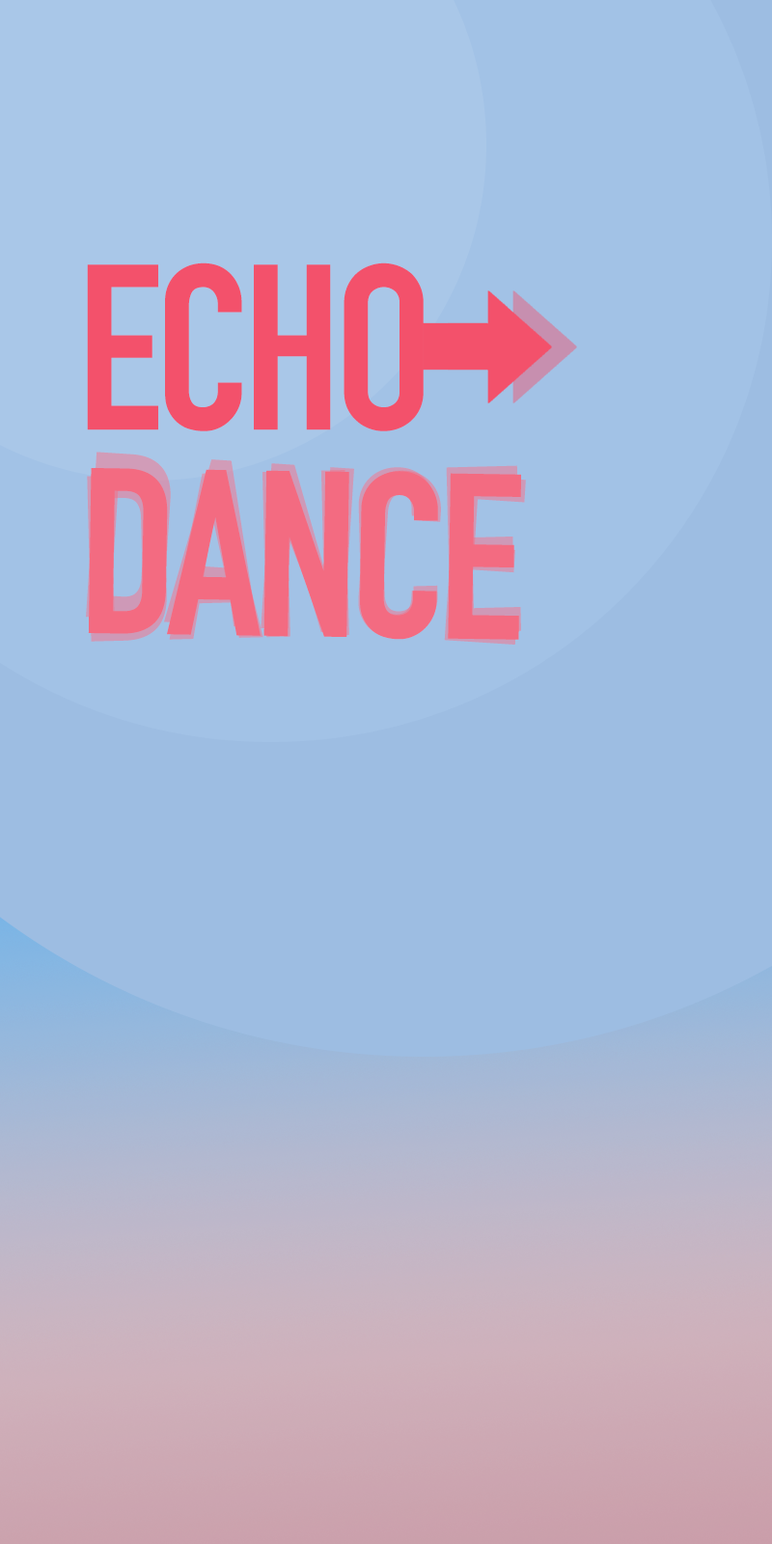
<style>
.page{position:relative;width:772px;height:1544px;background:#9dbde2}
.page>*{position:absolute;margin:0}
.t1{font:231.6px "DINCondensed-Bold";letter-spacing:-0.03em;color:#f3516b}
.t2{font:231.6px "DINCondensed-Bold";letter-spacing:-0.03em;color:#f36b81}
</style>
<div class="page">
<p class="t1" style="left:87px;top:263px;width:337px;height:168px">ECHO</p>
<p class="t2" style="left:86px;top:452px;width:440px;height:193px;rotate:4deg;opacity:0.51">DANCE</p>
<p class="t2" style="left:87px;top:465px;width:434px;height:177px;rotate:-1deg;opacity:0.51">DANCE</p>
<p class="t2" style="left:88px;top:468px;width:433px;height:172px;rotate:1deg">DANCE</p>
</div>
